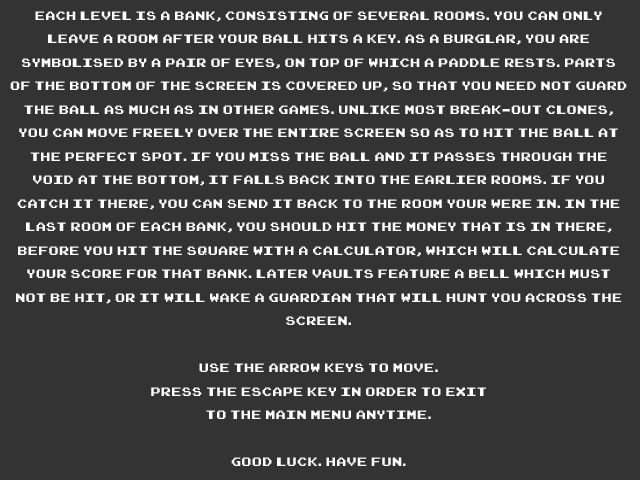
<style>
.page{position:relative;width:640px;height:480px;background:#333333}
.page>*{position:absolute;margin:0}
.t1{font:19.6px "Arcadepix-Plus";color:#ffffff}
</style>
<div class="page">
<p class="t1" style="left:10px;top:11px;width:617px;height:455px;text-align:center">EACH LEVEL IS A BANK, CONSISTING OF SEVERAL ROOMS. YOU CAN ONLY LEAVE A ROOM AFTER YOUR BALL HITS A KEY. AS A BURGLAR, YOU ARE SYMBOLISED BY A PAIR OF EYES, ON TOP OF WHICH A PADDLE RESTS. PARTS OF THE BOTTOM OF THE SCREEN IS COVERED UP, SO THAT YOU NEED NOT GUARD THE BALL AS MUCH AS IN OTHER GAMES. UNLIKE MOST BREAK-OUT CLONES, YOU CAN MOVE FREELY OVER THE ENTIRE SCREEN SO AS TO HIT THE BALL AT THE PERFECT SPOT. IF YOU MISS THE BALL AND IT PASSES THROUGH THE VOID AT THE BOTTOM, IT FALLS BACK INTO THE EARLIER ROOMS. IF YOU CATCH IT THERE, YOU CAN SEND IT BACK TO THE ROOM YOUR WERE IN. IN THE LAST ROOM OF EACH BANK, YOU SHOULD HIT THE MONEY THAT IS IN THERE, BEFORE YOU HIT THE SQUARE WITH A CALCULATOR, WHICH WILL CALCULATE YOUR SCORE FOR THAT BANK. LATER VAULTS FEATURE A BELL WHICH MUST NOT BE HIT, OR IT WILL WAKE A GUARDIAN THAT WILL HUNT YOU ACROSS THE SCREEN.<br><br>USE THE ARROW KEYS TO MOVE.<br>PRESS THE ESCAPE KEY IN ORDER TO EXIT <br>TO THE MAIN MENU ANYTIME.<br><br>GOOD LUCK. HAVE FUN.</p>
</div>
